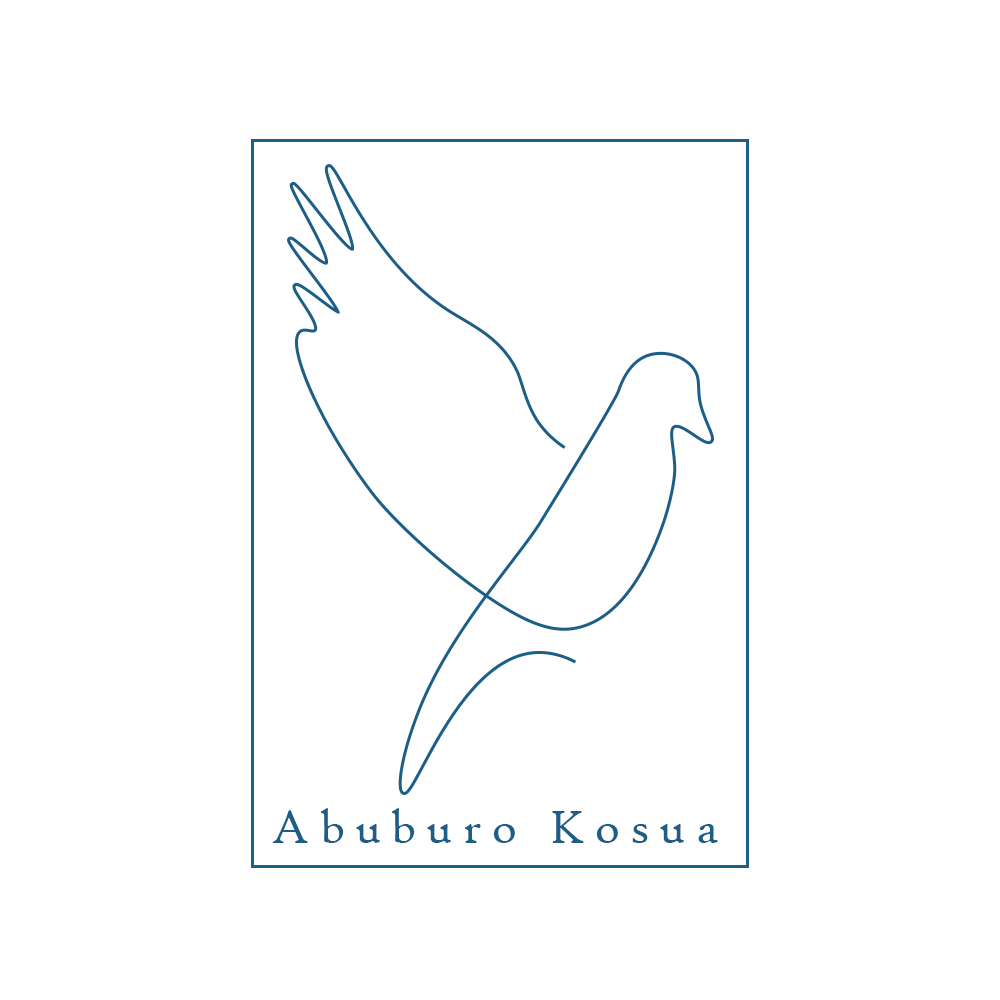
<style>
.page{position:relative;width:1000px;height:1000px;background:#ffffff}
.page>*{position:absolute;margin:0}
.t1{font:12px "HighTowerText-Reg";letter-spacing:0.2em;color:#1d5e87}
</style>
<div class="page">
<p class="t1" style="left:272px;top:808px;width:446px;height:35px">Abuburo Kosua</p>
</div>
